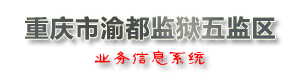
<style>
.page{position:relative;width:300px;height:80px;background:#ffffff}
.page>*{position:absolute;margin:0}
.t1{font:24px "MicrosoftYaHei-Bold";letter-spacing:0.05em;color:#535b5e}
.t2{font:18px "FZGLJW--GB1-0";letter-spacing:0.05em;color:#ff0000}
</style>
<div class="page">
<p class="t1" style="left:25px;top:16px;width:250px;height:24px">重庆市渝都监狱五监区</p>
<p class="t2" style="left:94px;top:50px;width:111px;height:15px">业务信息系统</p>
</div>
